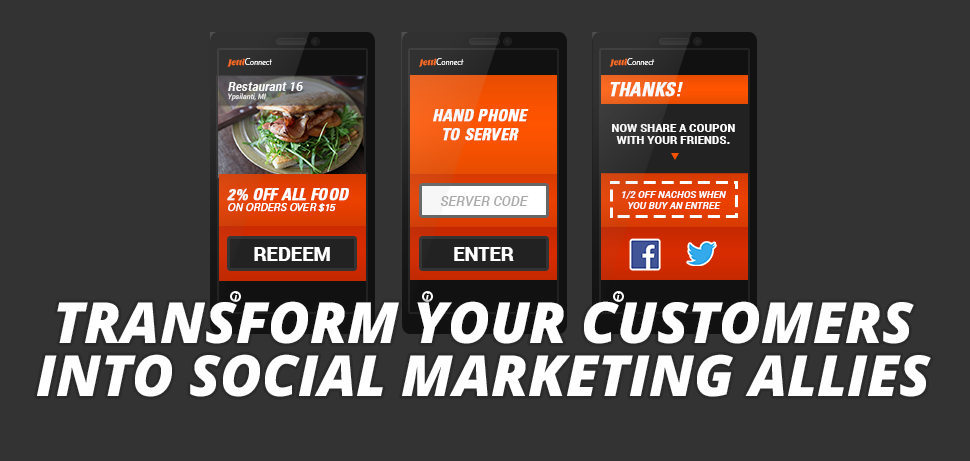
<style>
.page{position:relative;width:970px;height:461px;background:#333333}
.page>*{position:absolute;margin:0}
.t1{font:8.5px "JosefinSans";color:#fd6b23}
.t2{font:8.5px "SansitaOne";color:#fd6b23}
.t3{font:12.7px "Roboto-BoldItalic";color:#ffffff}
.t4{font:18.3px "Univers-CondensedBoldOblique";color:#ffffff;text-transform:uppercase;font-weight:bold}
.t5{font:7.3px "Roboto-Italic";color:#eeeeee}
.t6{font:15.9px "Univers-CondensedBoldOblique";color:#ffffff;text-transform:uppercase;font-weight:bold}
.t7{font:11.4px/11.9px "Roboto-Black";color:#ffffff}
.t8{font:14.2px "Roboto-MediumItalic";color:#aaaaaa}
.t9{font:10.2px/10.7px "Roboto-BoldItalic";color:#ffffff}
.t10{font:9.7px "Univers-LightOblique";color:#ffffff;text-transform:uppercase;font-weight:bold}
.t11{font:20px "Roboto-Black";color:#ffffff}
.t12{font:9.4px "Roboto-BoldItalic";color:#ffffff}
.t13{font:56.7px "OpenSans-ExtraboldItalic";color:#ffffff}
</style>
<div class="page">
<p class="t1" style="left:227px;top:58px;width:45px;height:9px"><span class="t2">Jetti</span>Connect</p>
<p class="t1" style="left:419px;top:58px;width:45px;height:9px"><span class="t2">Jetti</span>Connect</p>
<p class="t1" style="left:609px;top:58px;width:46px;height:9px"><span class="t2">Jetti</span>Connect</p>
<p class="t3" style="left:228px;top:82px;width:75px;height:9px">Restaurant 16</p>
<p class="t4" style="left:610px;top:82px;width:73px;height:15px">THANKS!</p>
<p class="t5" style="left:228px;top:93px;width:38px;height:8px">Ypsilanti, MI</p>
<p class="t6" style="left:433px;top:109px;width:96px;height:32px;text-align:center">Hand Phone<br>To Server</p>
<p class="t7" style="left:612px;top:124px;width:123px;height:20px;text-align:center">NOW SHARE A COUPON WITH YOUR FRIENDS.</p>
<p class="t6" style="left:227px;top:188px;width:122px;height:13px">2% Off All Food</p>
<p class="t8" style="left:440px;top:196px;width:89px;height:10px">SERVER CODE</p>
<p class="t9" style="left:622px;top:191px;width:104px;height:18px;text-align:center">1/2 OFF NACHOS WHEN<br>YOU BUY AN ENTREE</p>
<p class="t10" style="left:228px;top:203px;width:108px;height:9px">on orders over $15</p>
<p class="t11" style="left:254px;top:247px;width:76px;height:14px">REDEEM</p>
<p class="t11" style="left:454px;top:247px;width:60px;height:14px">ENTER</p>
<p class="t12" style="left:234px;top:293px;width:4px;height:7px">i</p>
<p class="t12" style="left:426px;top:293px;width:3px;height:7px">i</p>
<p class="t12" style="left:616px;top:293px;width:4px;height:7px">i</p>
<p class="t13" style="left:37px;top:301px;width:894px;height:96px">TRANSFORM YOUR CUSTOMERS INTO SOCIAL MARKETING ALLIES</p>
</div>
